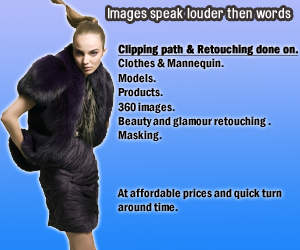
<style>
.page{position:relative;width:300px;height:250px}
.page>*{position:absolute;margin:0}
.t1{font:14px "HeadacheNormal";color:#ffffff}
.t2{font:12px "FranklinGothic-DemiCond";color:#040000}
.t3{font:12px "FranklinGothic-DemiCond";color:#040000;font-weight:bold;text-decoration:underline}
</style>
<div class="page">
<p class="t1" style="left:108px;top:8px;width:183px;height:13px">Images speak louder then words</p>
<p class="t2" style="left:117px;top:44px;width:182px;height:168px"><span class="t3">Clipping path &amp; Retouching done on.<br></span>Clothes &amp; Mannequin.<br>Models.<br>Products.<br>360 images.<br>Beauty and glamour retouching .<br>Masking.<br><br><br><br>At affordable prices and quick turn <br>around time.</p>
</div>
